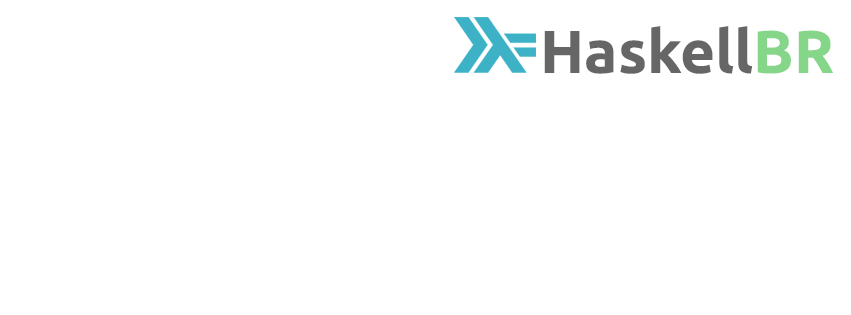
<style>
.page{position:relative;width:851px;height:315px;background:#ffffff}
.page>*{position:absolute;margin:0}
.t1{font:60.5px "Ubuntu-Bold";color:#666666}
.t2{font:60.5px "Ubuntu-Bold";color:#85d689}
</style>
<div class="page">
<p class="t1" style="left:544px;top:26px;width:289px;height:48px">Haskell<span class="t2">BR</span></p>
</div>
